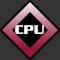
<style>
.page{position:relative;width:60px;height:60px;background:#333333}
.page>*{position:absolute;margin:0}
.t1{font:13.8px "Serpentine-Bold-Bold";color:#ffffff}
</style>
<div class="page">
<p class="t1" style="left:15px;top:25px;width:30px;height:9px">CPU</p>
</div>
